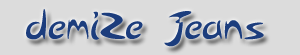
<style>
.page{position:relative;width:300px;height:55px;background:#dcdcdc}
.page>*{position:absolute;margin:0}
.t1{font:36px "Arabolical1";color:#1c3d7d}
</style>
<div class="page">
<p class="t1" style="left:26px;top:9px;width:238px;height:38px">demiZe Jeans</p>
</div>
